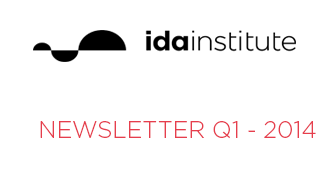
<style>
.page{position:relative;width:332px;height:184px;background:#ffffff}
.page>*{position:absolute;margin:0}
.t1{font:23.3px "Gotham-Light";color:#e63e4d}
</style>
<div class="page">
<p class="t1" style="left:40px;top:121px;width:276px;height:18px">NEWSLETTER Q1 - 2014</p>
</div>
